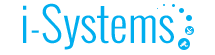
<style>
.page{position:relative;width:215px;height:55px;background:#ffffff}
.page>*{position:absolute;margin:0}
.t1{font:46.3px "Oswald-Light";color:#00aeef}
</style>
<div class="page">
<p class="t1" style="left:23px;top:3px;width:151px;height:47px">i-Systems</p>
</div>
